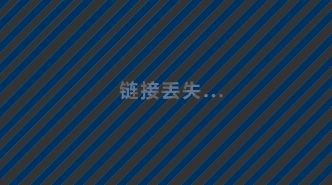
<style>
.page{position:relative;width:332px;height:185px;background:#333333}
.page>*{position:absolute;margin:0}
.t1{font:18.7px "MicrosoftYaHei-Bold";letter-spacing:0.12em}
</style>
<div class="page">
<p class="t1" style="left:119px;top:81px;width:104px;height:19px">链接丢失...</p>
</div>
